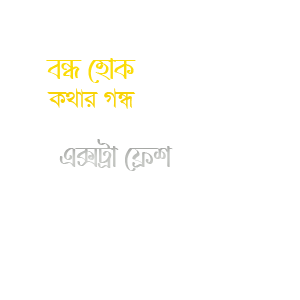
<style>
.page{position:relative;width:300px;height:300px;background:#ffffff}
.page>*{position:absolute;margin:0}
.t1{font:30px "LiRajdipSatyajitANSIV1";letter-spacing:-0.025em;color:#fbdc08}
.t2{font:30px "SutonnyMJ";letter-spacing:-0.025em;color:#f8d305}
.t3{font:30px "LiRajdipSatyajitANSIV1";letter-spacing:-0.025em;color:#c0c2bf}
</style>
<div class="page">
<p class="t1" style="left:46px;top:58px;width:90px;height:25px">eÜ †nvK</p>
<p class="t2" style="left:47px;top:88px;width:89px;height:21px">K_vi MÜ</p>
<p class="t3" style="left:59px;top:139px;width:114px;height:32px">G·Uªv †d«k</p>
</div>
